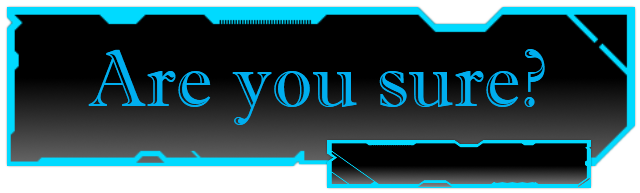
<style>
.page{position:relative;width:640px;height:193px;background:#000000}
.page>*{position:absolute;margin:0}
.t1{font:80px "ImprintMT-Shadow";color:#00aeef}
</style>
<div class="page">
<p class="t1" style="left:88px;top:49px;width:457px;height:76px">Are you sure?</p>
</div>
